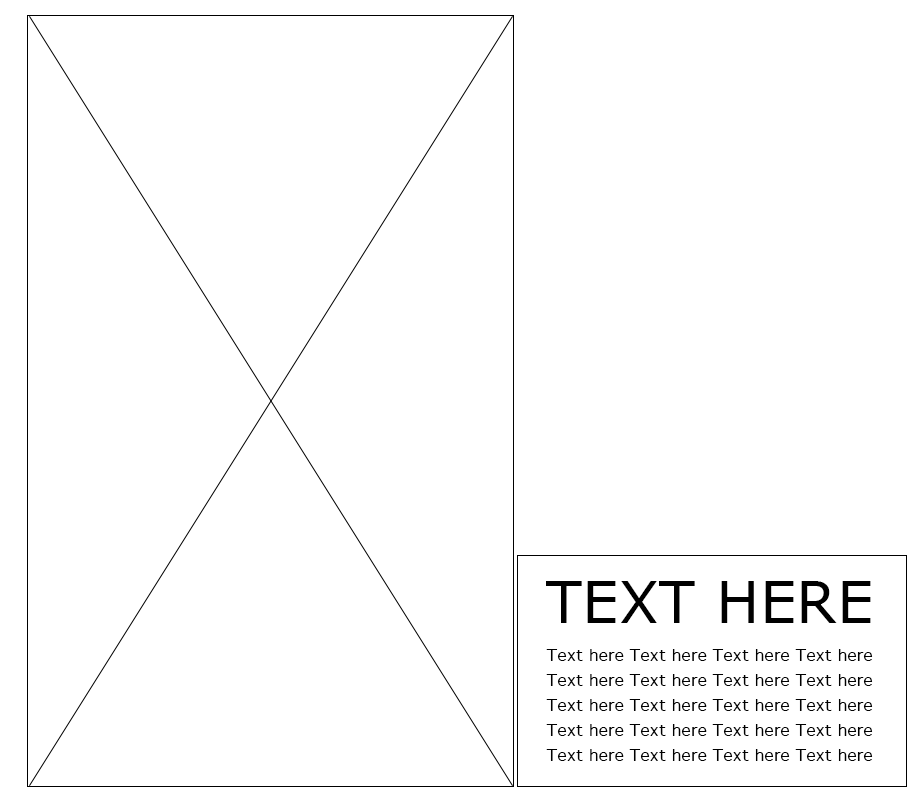
<style>
.page{position:relative;width:915px;height:795px;background:#ffffff}
.page>*{position:absolute;margin:0}
.t1{font:58.3px "Verdana";color:#000000}
.t2{font:16.7px/25px "Geneva";color:#000000}
</style>
<div class="page">
<p class="t1" style="left:546px;top:581px;width:325px;height:42px">TEXT HERE</p>
<p class="t2" style="left:546px;top:649px;width:327px;height:112px">Text here Text here Text here Text here <br>Text here Text here Text here Text here <br>Text here Text here Text here Text here <br>Text here Text here Text here Text here <br>Text here Text here Text here Text here</p>
</div>
